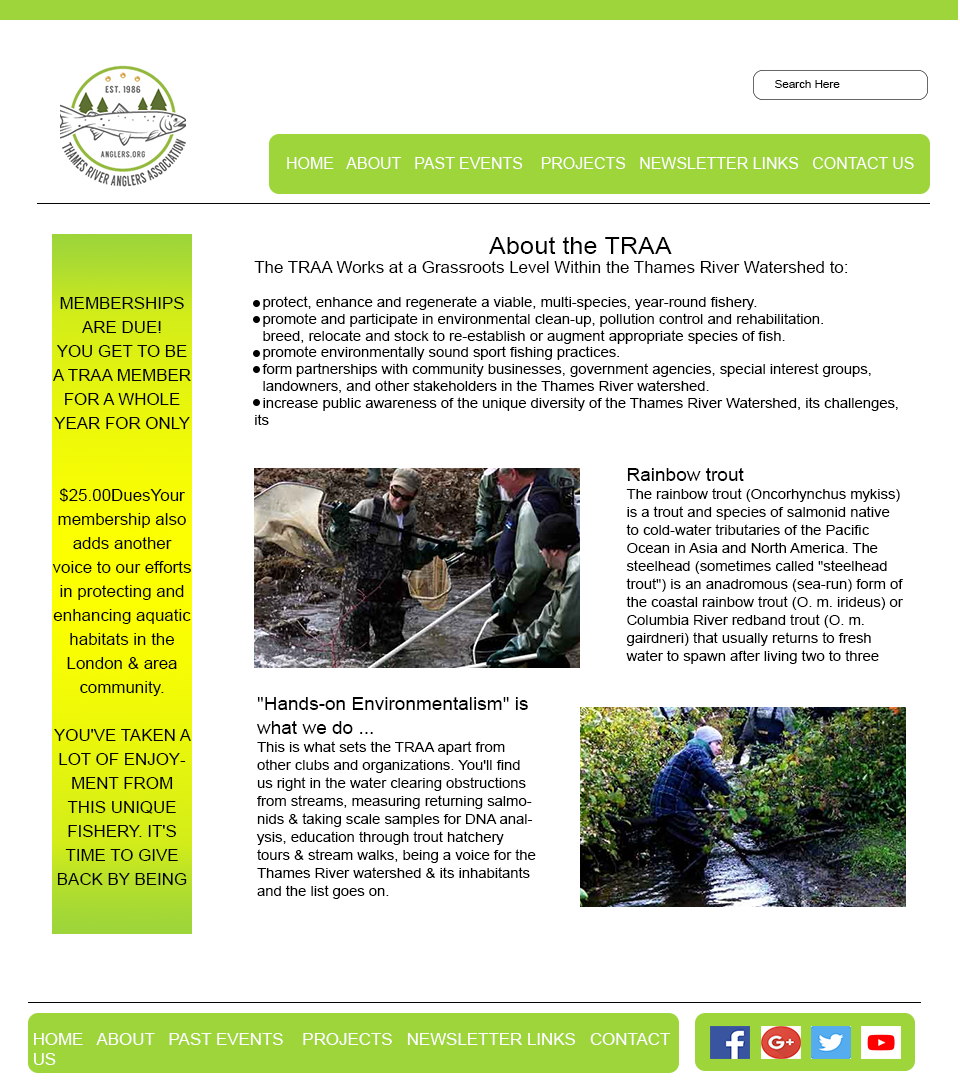
<style>
.page{position:relative;width:960px;height:1080px;background:#ffffff}
.page>*{position:absolute;margin:0}
.t1{font:11px "ArialMT";color:#040404;scale:1.06 1}
.t2{font:18px "ArialMT";color:#040404;scale:1.06 1}
.t3{font:16px "ArialMT";color:#fefdfd}
.t4{font:14px "ArialMT";color:#000000;scale:1.06 1}
.t5{font:24px "ArialMT";color:#000000;scale:1.06 1}
.t6{font:16px "ArialMT";color:#000000;scale:1.06 1}
.t7{font:16px/24px "ArialMT";color:#000000;scale:1.06 1}
.t8{font:14px/18px "ArialMT";color:#000000;scale:1.06 1}
.t9{font:18px/24px "ArialMT";color:#000000;scale:1.06 1}
.t10{font:14px/18px "ArialMT";color:#010101;scale:1.06 1}
.t11{font:18px "ArialMT";color:#000000;scale:1.06 1}
.t12{font:16px "ArialMT";color:#fefdfd;scale:1.06 1}
</style>
<div class="page">
<p class="t1" style="left:775px;top:80px;width:65px;height:8px"><span class="t2">  </span>  Search Here</p>
<p class="t3" style="left:287px;top:157px;width:627px;height:12px">HOME   ABOUT   PAST EVENTS    PROJECTS   NEWSLETTER LINKS   CONTACT US</p>
<p class="t4" style="left:254px;top:236px;width:644px;height:189px;text-align:center"><span class="t5">About the TRAA<br></span><span class="t6">The TRAA Works at a Grassroots Level Within the Thames River Watershed to:<br></span><br>  protect, enhance and regenerate a viable, multi-species, year-round fishery.<br>  promote and participate in environmental clean-up, pollution control and rehabilitation.<br>  breed, relocate and stock to re-establish or augment appropriate species of fish.<br>  promote environmentally sound sport fishing practices.<br>  form partnerships with community businesses, government agencies, special interest groups, <br>  landowners, and other stakeholders in the Thames River watershed.<br>  increase public awareness of the unique diversity of the Thames River Watershed, its challenges, its <br>  recreational opportunities and its vital importance to our community.</p>
<p class="t7" style="left:52px;top:297px;width:139px;height:588px;text-align:center">MEMBERSHIPS<br>ARE DUE! <br>YOU GET TO BE A TRAA MEMBER FOR A WHOLE YEAR FOR ONLY <br><br><br>$25.00DuesYour membership also adds another voice to our efforts in protecting and enhancing aquatic habitats in the London &amp; area community.<br><br>YOU'VE TAKEN A LOT OF ENJOYMENT FROM THIS UNIQUE FISHERY. IT'S TIME TO GIVE BACK BY BEING PART OF THE SOLUTION.</p>
<p class="t8" style="left:626px;top:468px;width:277px;height:196px"><span class="t9">Rainbow trout<br></span>The rainbow trout (Oncorhynchus mykiss) is a trout and species of salmonid native to cold-water tributaries of the Pacific Ocean in Asia and North America. The steelhead (sometimes called "steelhead trout") is an anadromous (sea-run) form of the coastal rainbow trout (O. m. irideus) or Columbia River redband trout (O. m. gairdneri) that usually returns to fresh water to spawn after living two to three years in the ocean.</p>
<p class="t10" style="left:256px;top:697px;width:280px;height:202px"><span class="t11">"Hands-on Environmentalism" is </span><span class="t9">what we do ...<br></span>This is what sets the TRAA apart from other clubs and organizations. You'll find us right in the water clearing obstructions from streams, measuring returning salmonids &amp; taking scale samples for DNA analysis, education through trout hatchery tours &amp; stream walks, being a voice for the Thames River watershed &amp; its inhabitants and the list goes on.</p>
<p class="t12" style="left:34px;top:1033px;width:637px;height:32px">HOME   ABOUT   PAST EVENTS    PROJECTS   NEWSLETTER LINKS   CONTACT US</p>
</div>
